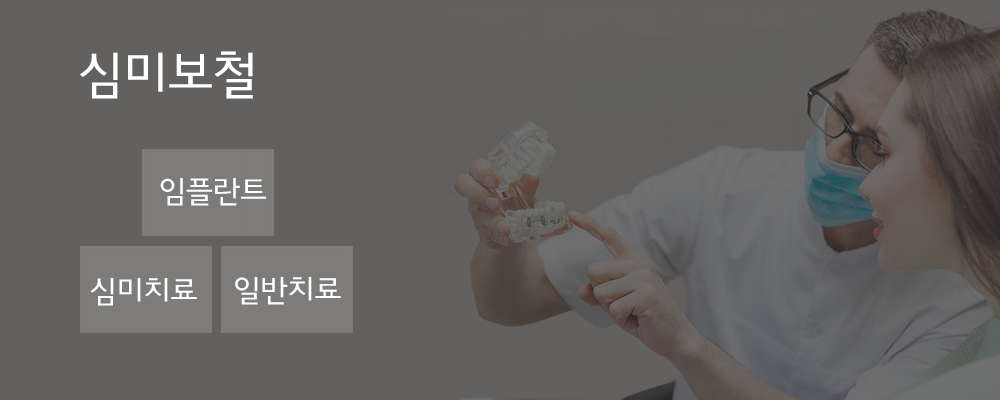
<style>
.page{position:relative;width:1000px;height:400px;background:#62615f}
.page>*{position:absolute;margin:0}
.t1{font:50px "RixBGL";color:#ffffff}
.t2{font:30px "RixBGL";color:#ffffff}
</style>
<div class="page">
<p class="t1" style="left:80px;top:51px;width:173px;height:48px">심미보철</p>
<p class="t2" style="left:160px;top:178px;width:106px;height:28px">임플란트</p>
<p class="t2" style="left:90px;top:278px;width:107px;height:28px">심미치료</p>
<p class="t2" style="left:235px;top:277px;width:106px;height:28px">일반치료</p>
</div>
